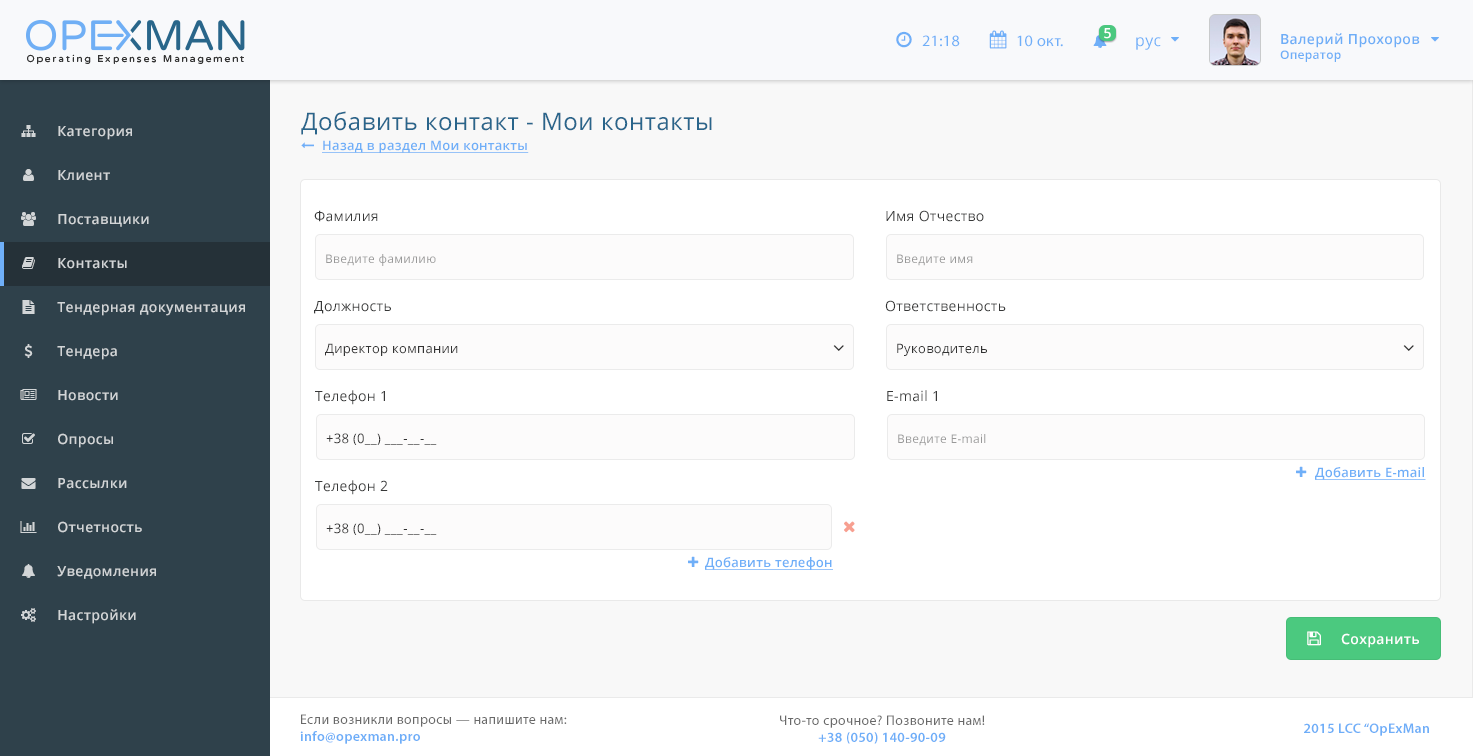
<style>
.page{position:relative;width:1473px;height:756px;background:#ffffff}
.page>*{position:absolute;margin:0}
.t1{font:13.9px "OpenSans-Semibold";letter-spacing:0.025em;color:#ffffff}
.t2{font:15.9px "MyriadPro-Regular";letter-spacing:0.025em;color:#6faff8}
.t3{font:15.9px "OpenSans";letter-spacing:0.025em;color:#6eaff8}
.t4{font:13.9px "OpenSans-Semibold";letter-spacing:0.025em;color:#6eaef7}
.t5{font:12px "OpenSans-Semibold";letter-spacing:0.025em;color:#6eaef7}
.t6{font:23.9px "OpenSans";letter-spacing:0.025em;color:#29658b}
.t7{font:13.9px "OpenSans-Semibold";letter-spacing:0.025em;color:#d2d5d7}
.t8{font:13px "OpenSans-Semibold";letter-spacing:0.025em;color:#6faff8;text-decoration:underline}
.t9{font:13.9px "OpenSans";letter-spacing:0.025em;color:#373838}
.t10{font:12px "OpenSans";letter-spacing:0.025em;color:#999999}
.t11{font:13px "OpenSans";letter-spacing:0.025em;color:#333333}
.t12{font:13.9px "MyriadPro-Regular";letter-spacing:0.025em;color:#696969}
.t13{font:13.9px "MyriadPro-Semibold";letter-spacing:0.025em;color:#6eaef8}
</style>
<div class="page">
<p class="t1" style="left:1104px;top:28px;width:7px;height:11px">5</p>
<p class="t2" style="left:922px;top:35px;width:38px;height:12px">21:18</p>
<p class="t2" style="left:1017px;top:35px;width:46px;height:12px">10 окт.</p>
<p class="t3" style="left:1136px;top:37px;width:25px;height:13px">рус</p>
<p class="t4" style="left:1280px;top:33px;width:140px;height:29px">Валерий Прохоров<br><span class="t5">Оператор</span></p>
<p class="t6" style="left:301px;top:111px;width:411px;height:24px">Добавить контакт - Мои контакты</p>
<p class="t7" style="left:58px;top:126px;width:74px;height:14px">Категория</p>
<p class="t8" style="left:322px;top:140px;width:207px;height:13px">Назад в раздел Мои контакты</p>
<p class="t7" style="left:58px;top:170px;width:52px;height:11px">Клиент</p>
<p class="t7" style="left:58px;top:214px;width:91px;height:13px">Поставщики</p>
<p class="t9" style="left:314px;top:210px;width:64px;height:12px">Фамилия</p>
<p class="t9" style="left:886px;top:210px;width:98px;height:12px">Имя Отчество</p>
<p class="t10" style="left:326px;top:254px;width:110px;height:12px">Введите фамилию</p>
<p class="t10" style="left:897px;top:254px;width:76px;height:12px">Введите имя</p>
<p class="t7" style="left:58px;top:258px;width:69px;height:11px">Контакты</p>
<p class="t7" style="left:57px;top:302px;width:188px;height:14px">Тендерная документация</p>
<p class="t9" style="left:314px;top:301px;width:77px;height:13px">Должность</p>
<p class="t9" style="left:885px;top:300px;width:121px;height:12px">Ответственность</p>
<p class="t7" style="left:57px;top:346px;width:60px;height:14px">Тендера</p>
<p class="t11" style="left:325px;top:343px;width:133px;height:13px">Директор компании</p>
<p class="t11" style="left:897px;top:343px;width:90px;height:13px">Руководитель</p>
<p class="t7" style="left:58px;top:390px;width:60px;height:11px">Новости</p>
<p class="t9" style="left:315px;top:390px;width:70px;height:15px">Телефон 1</p>
<p class="t9" style="left:887px;top:390px;width:50px;height:12px">E-mail 1</p>
<p class="t7" style="left:58px;top:433px;width:55px;height:15px">Опросы</p>
<p class="t11" style="left:326px;top:433px;width:111px;height:12px">+38 (0__) ___-__-__</p>
<p class="t10" style="left:898px;top:434px;width:88px;height:12px">Введите E-mail</p>
<p class="t8" style="left:1315px;top:467px;width:111px;height:13px">Добавить E-mail</p>
<p class="t7" style="left:58px;top:478px;width:69px;height:11px">Рассылки</p>
<p class="t9" style="left:315px;top:480px;width:73px;height:15px">Телефон 2</p>
<p class="t7" style="left:58px;top:521px;width:84px;height:12px">Отчетность</p>
<p class="t11" style="left:326px;top:523px;width:111px;height:12px">+38 (0__) ___-__-__</p>
<p class="t8" style="left:705px;top:557px;width:128px;height:13px">Добавить телефон</p>
<p class="t7" style="left:57px;top:566px;width:99px;height:13px">Уведомления</p>
<p class="t7" style="left:58px;top:609px;width:78px;height:15px">Настройки</p>
<p class="t1" style="left:1341px;top:633px;width:78px;height:15px">Сохранить</p>
<p class="t12" style="left:300px;top:714px;width:267px;height:30px">Если возникли вопросы — напишите нам:<br><span class="t13">info@opexman.pro</span></p>
<p class="t12" style="left:780px;top:715px;width:205px;height:29px;text-align:center">Что-то срочное? Позвоните нам!<br><span class="t13">+38 (050) 140-90-09</span></p>
<p class="t13" style="left:1304px;top:723px;width:125px;height:13px">2015 LCC “OpExMan</p>
</div>
